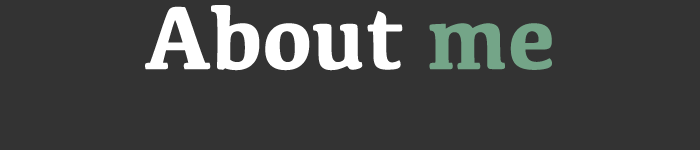
<style>
.page{position:relative;width:700px;height:150px;background:#333333}
.page>*{position:absolute;margin:0}
.t1{font:92px "Kefa-Bold";color:#ffffff}
.t2{font:92px "Kefa-Bold";color:#74a588}
</style>
<div class="page">
<p class="t1" style="left:145px;top:5px;width:407px;height:66px">About <span class="t2">me</span></p>
</div>
